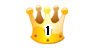
<style>
.page{position:relative;width:100px;height:50px;background:#ffffff}
.page>*{position:absolute;margin:0}
.t1{font:12px "Dotum";color:#000000;font-weight:bold}
</style>
<div class="page">
<p class="t1" style="left:46px;top:26px;width:3px;height:9px">1</p>
</div>
